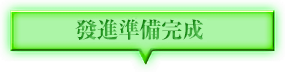
<style>
.page{position:relative;width:285px;height:72px}
.page>*{position:absolute;margin:0}
.t1{font:22px "RyuminPr6N-ExBold";letter-spacing:-0.025em}
</style>
<div class="page">
<p class="t1" style="left:75px;top:19px;width:128px;height:21px">發進準備完成</p>
</div>
